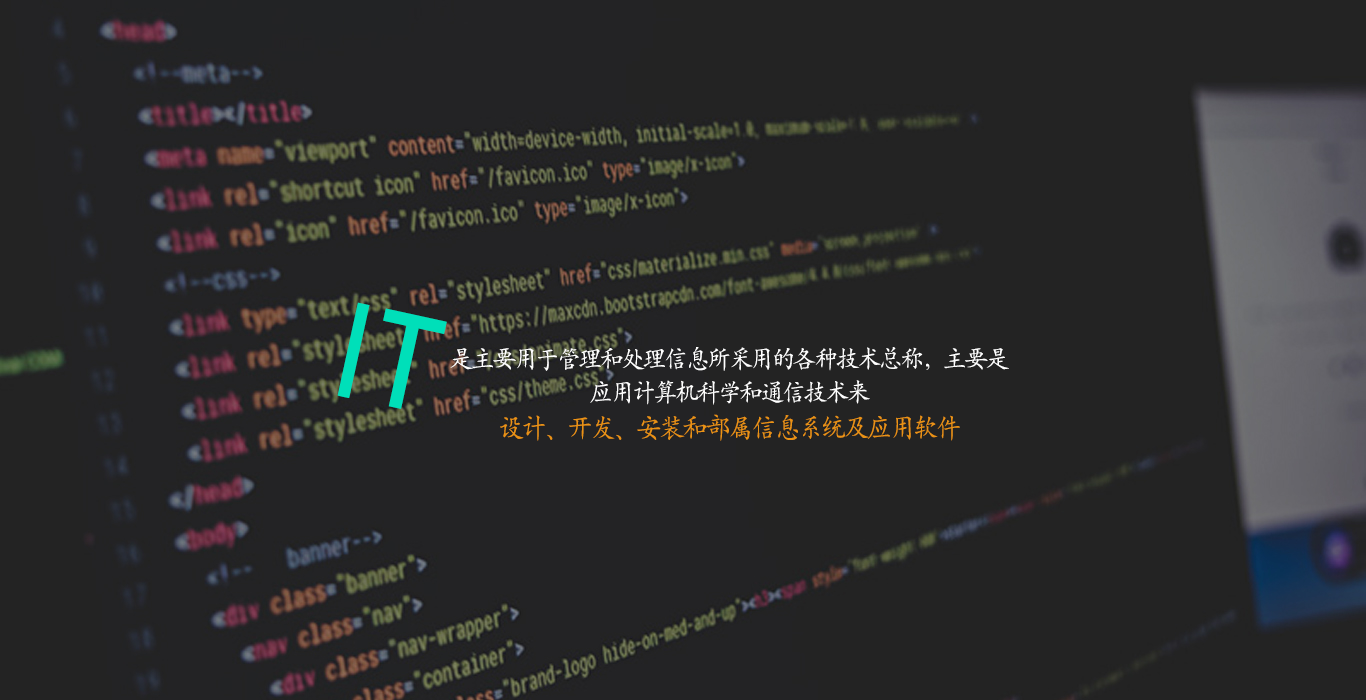
<style>
.page{position:relative;width:1366px;height:700px;background:#232323}
.page>*{position:absolute;margin:0}
.t1{font:142.2px "HYb1gj";letter-spacing:-0.02em;color:#00dfb9;scale:0.93 1}
.t2{font:25.7px "HYc1gj";letter-spacing:-0.1em;color:#ffffff;scale:0.93 1}
.t3{font:27.6px "HYc1gj";letter-spacing:-0.1em;color:#ea9215;scale:0.93 1}
</style>
<div class="page">
<p class="t1" style="left:337px;top:302px;width:110px;height:107px;rotate:12deg">IT</p>
<p class="t2" style="left:450px;top:347px;width:559px;height:94px;text-align:center">是主要用于管理和处理信息所采用的各种技术总称，主要是<br>应用计算机科学和通信技术来<br><span class="t3">设计、开发、安装和部属信息系统及应用软件</span></p>
</div>
